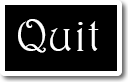
<style>
.page{position:relative;width:128px;height:82px;background:#000000}
.page>*{position:absolute;margin:0}
.t1{font:47px "Harrington";color:#ffffff}
</style>
<div class="page">
<p class="t1" style="left:18px;top:19px;width:81px;height:34px">Quit</p>
</div>
